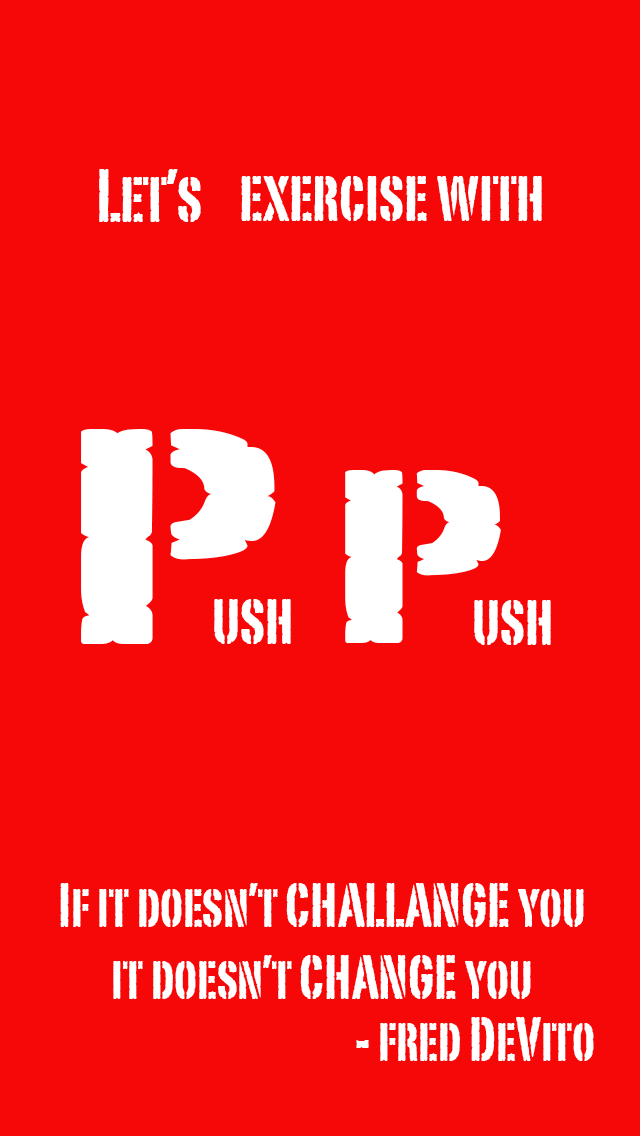
<style>
.page{position:relative;width:640px;height:1136px;background:#f70808}
.page>*{position:absolute;margin:0}
.t1{font:72.3px "PortagoITCTT";color:#ffffff}
.t2{font:72px "PortagoITCTT";color:#ffffff}
.t3{font:300.1px "PortagoITCTT";color:#ffffff;scale:1.83 1}
.t4{font:240px "PortagoITCTT";color:#ffffff;scale:1.83 1}
.t5{font:71.9px "PortagoITCTT";color:#ffffff}
.t6{font:60px "PortagoITCTT";color:#ffffff}
</style>
<div class="page">
<p class="t1" style="left:99px;top:169px;width:102px;height:53px">Let’s</p>
<p class="t2" style="left:241px;top:176px;width:301px;height:45px">exercise with</p>
<p class="t3" style="left:81px;top:429px;width:195px;height:215px">P</p>
<p class="t4" style="left:345px;top:470px;width:156px;height:173px">P</p>
<p class="t5" style="left:214px;top:599px;width:77px;height:45px">ush</p>
<p class="t5" style="left:474px;top:600px;width:77px;height:45px">ush</p>
<p class="t6" style="left:60px;top:883px;width:524px;height:116px;text-align:center">If it doesn’t CHALLANGE you<br>it doesn’t CHANGE you</p>
<p class="t6" style="left:356px;top:1017px;width:238px;height:44px">- fred DeVito</p>
</div>
